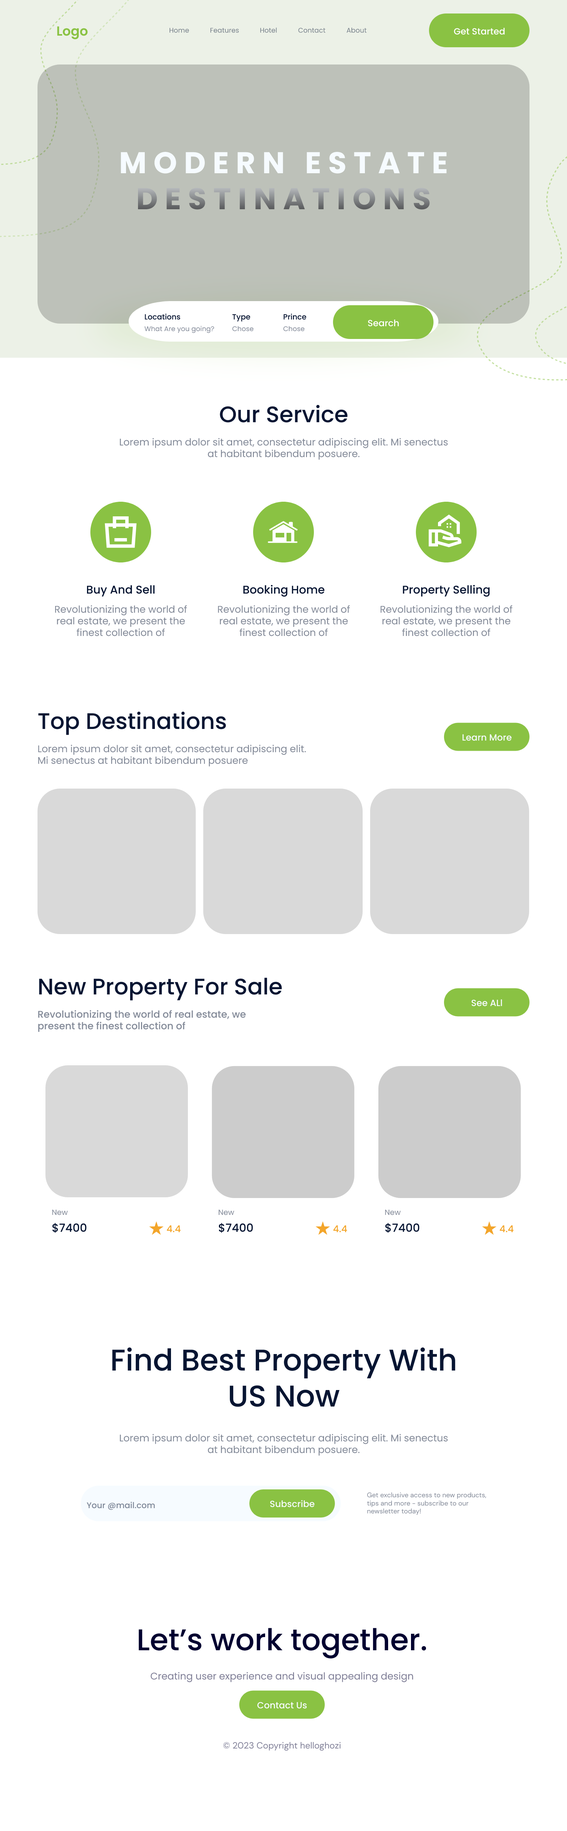
<style>
.page{position:relative;width:567px;height:1831px;background:#ffffff}
.page>*{position:absolute;margin:0}
.t1{font:6.8px "Poppins-Regular";color:#79838c}
.t2{font:9px "Poppins-Medium";color:#ffffff}
.t3{font:7.5px "Poppins-Medium";color:#071532}
.t4{font:6.8px "Poppins-Regular";color:#838a98}
.t5{font:22.5px "Poppins-Medium";color:#071532}
.t6{font:9.8px "Poppins-Regular";color:#838a98}
.t7{font:11.2px "Poppins-Medium";color:#071532}
.t8{font:9px "Poppins-Medium";color:#f6fbff}
.t9{font:9.8px "Poppins-Medium";color:#838a98}
.t10{font:7.5px "Poppins-Regular";color:#838a98}
.t11{font:9.4px "Poppins-Medium";color:#f3a52a}
.t12{font:30px "Poppins-Medium";color:#071532}
.t13{font:6.8px "DMSans-Regular";color:#838a98}
.t14{font:8.2px "Poppins-Medium";color:#7e8898}
.t15{font:30px "Poppins-Medium";color:#010030}
.t16{font:9.8px "Poppins-Regular";color:#807f97}
.t17{font:9px "DMSans-Regular";color:#807f97}
</style>
<div class="page">
<p class="t1" style="left:170px;top:28px;width:19px;height:5px">Home</p>
<p class="t1" style="left:210px;top:28px;width:29px;height:5px">Features</p>
<p class="t1" style="left:260px;top:27px;width:17px;height:6px">Hotel</p>
<p class="t1" style="left:298px;top:28px;width:28px;height:5px">Contact</p>
<p class="t1" style="left:346px;top:27px;width:21px;height:6px">About</p>
<p class="t2" style="left:454px;top:28px;width:51px;height:7px">Get Started</p>
<p class="t3" style="left:145px;top:314px;width:35px;height:6px">Locations</p>
<p class="t3" style="left:232px;top:314px;width:18px;height:8px">Type</p>
<p class="t3" style="left:284px;top:314px;width:22px;height:6px">Prince</p>
<p class="t4" style="left:144px;top:326px;width:70px;height:7px">What Are you going?</p>
<p class="t4" style="left:232px;top:326px;width:22px;height:6px">Chose</p>
<p class="t4" style="left:283px;top:326px;width:21px;height:6px">Chose</p>
<p class="t2" style="left:368px;top:320px;width:31px;height:7px">Search</p>
<p class="t5" style="left:220px;top:405px;width:128px;height:18px">Our Service</p>
<p class="t6" style="left:120px;top:438px;width:328px;height:22px;text-align:center">Lorem ipsum dolor sit amet, consectetur adipiscing elit. Mi senectus at habitant bibendum posuere.</p>
<p class="t7" style="left:87px;top:585px;width:68px;height:12px">Buy And Sell</p>
<p class="t7" style="left:243px;top:585px;width:82px;height:12px">Booking Home</p>
<p class="t7" style="left:403px;top:585px;width:87px;height:12px">Property Selling</p>
<p class="t6" style="left:55px;top:605px;width:132px;height:31px;text-align:center">Revolutionizing the world of real estate, we present the finest collection of</p>
<p class="t6" style="left:218px;top:605px;width:132px;height:31px;text-align:center">Revolutionizing the world of real estate, we present the finest collection of</p>
<p class="t6" style="left:380px;top:605px;width:133px;height:31px;text-align:center">Revolutionizing the world of real estate, we present the finest collection of</p>
<p class="t5" style="left:38px;top:711px;width:188px;height:24px">Top Destinations</p>
<p class="t8" style="left:462px;top:734px;width:50px;height:7px">Learn More</p>
<p class="t6" style="left:38px;top:745px;width:268px;height:21px">Lorem ipsum dolor sit amet, consectetur adipiscing elit. Mi senectus at habitant bibendum posuere</p>
<p class="t5" style="left:39px;top:978px;width:243px;height:22px">New Property For Sale</p>
<p class="t8" style="left:471px;top:999px;width:31px;height:7px">See ALl</p>
<p class="t9" style="left:38px;top:1010px;width:208px;height:22px">Revolutionizing the world of real estate, we present the finest collection of</p>
<p class="t10" style="left:52px;top:1210px;width:16px;height:5px">New</p>
<p class="t10" style="left:219px;top:1210px;width:15px;height:5px">New</p>
<p class="t10" style="left:385px;top:1210px;width:16px;height:5px">New</p>
<p class="t7" style="left:52px;top:1223px;width:35px;height:10px">$7400</p>
<p class="t11" style="left:167px;top:1226px;width:14px;height:7px">4.4</p>
<p class="t7" style="left:219px;top:1223px;width:34px;height:10px">$7400</p>
<p class="t11" style="left:333px;top:1226px;width:14px;height:7px">4.4</p>
<p class="t7" style="left:385px;top:1223px;width:35px;height:10px">$7400</p>
<p class="t11" style="left:500px;top:1226px;width:14px;height:7px">4.4</p>
<p class="t12" style="left:112px;top:1347px;width:343px;height:60px;text-align:center">Find Best Property With <br>US Now</p>
<p class="t6" style="left:120px;top:1434px;width:328px;height:22px;text-align:center">Lorem ipsum dolor sit amet, consectetur adipiscing elit. Mi senectus at habitant bibendum posuere.</p>
<p class="t13" style="left:367px;top:1492px;width:119px;height:23px">Get exclusive access to new products, tips and more - subscribe to our newsletter today!</p>
<p class="t14" style="left:87px;top:1502px;width:68px;height:8px">Your @mail.com</p>
<p class="t8" style="left:270px;top:1500px;width:45px;height:8px">Subscribe</p>
<p class="t15" style="left:139px;top:1628px;width:287px;height:31px">Let’s work together.</p>
<p class="t16" style="left:150px;top:1672px;width:263px;height:11px">Creating user experience and visual appealing design</p>
<p class="t8" style="left:257px;top:1702px;width:50px;height:7px">Contact Us</p>
<p class="t17" style="left:223px;top:1742px;width:118px;height:9px">© 2023 Copyright helloghozi</p>
</div>
